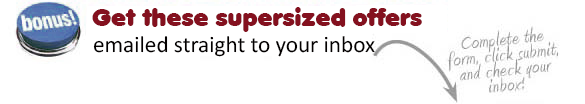
<style>
.page{position:relative;width:585px;height:104px;background:#ffffff}
.page>*{position:absolute;margin:0}
.t1{font:24px "Valken";color:#84111f}
.t2{font:23.2px "Calibri";color:#030000}
</style>
<div class="page">
<p class="t1" style="left:92px;top:7px;width:330px;height:25px">Get these supersized offers</p>
<p class="t2" style="left:93px;top:36px;width:282px;height:21px">emailed straight to your inbox</p>
</div>
